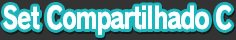
<style>
.page{position:relative;width:236px;height:40px;background:#333333}
.page>*{position:absolute;margin:0}
.t1{font:30px "RodinPro-EB";letter-spacing:-0.055em;color:#f9ffff;scale:0.77 1}
</style>
<div class="page">
<p class="t1" style="left:3px;top:5px;width:229px;height:30px">Set Compartilhado C</p>
</div>
